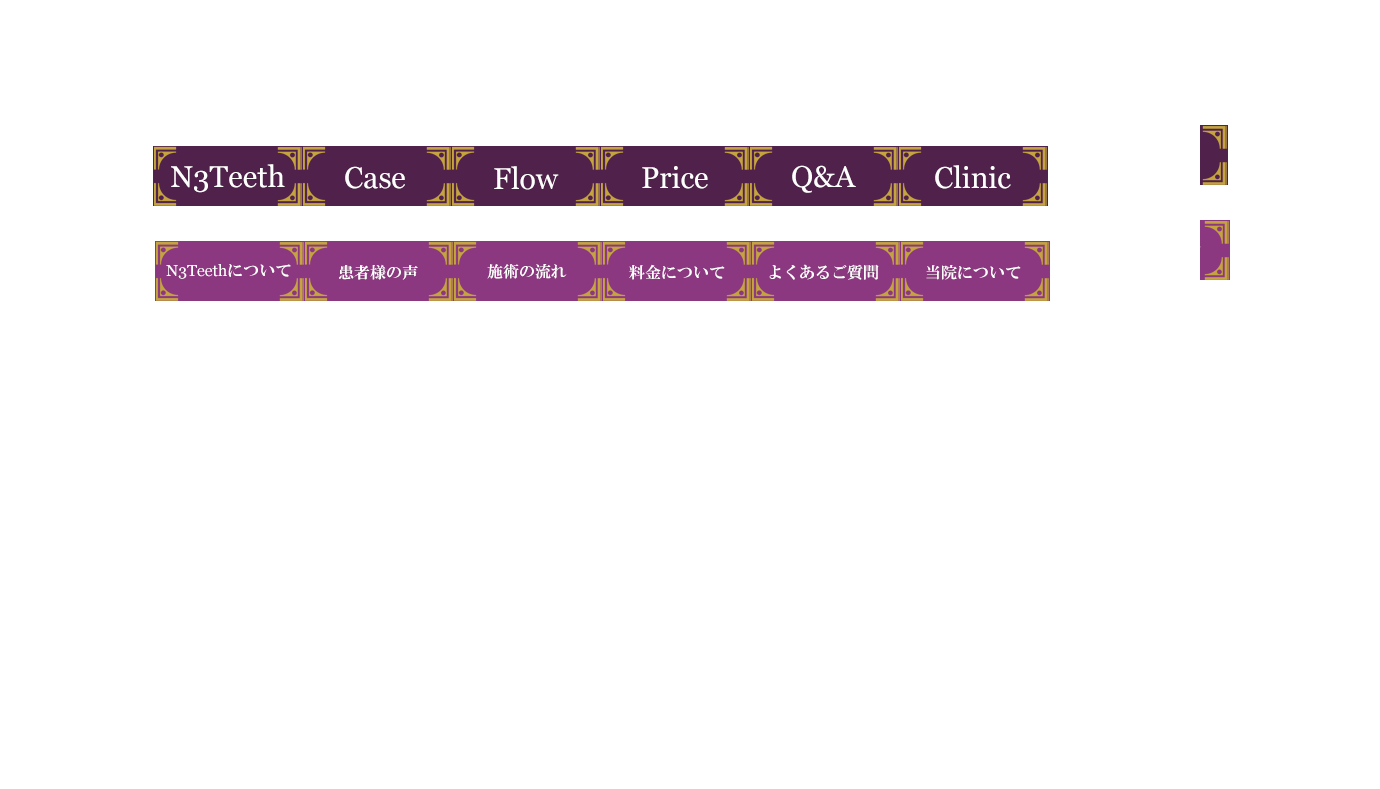
<style>
.page{position:relative;width:1380px;height:789px;background:#ffffff}
.page>*{position:absolute;margin:0}
.t1{font:30px "Georgia";color:#ffffff}
.t2{font:16px "Georgia";color:#ffffff}
.t3{font:16px "HGMinchoE";color:#ffffff}
</style>
<div class="page">
<p class="t1" style="left:171px;top:164px;width:114px;height:29px">N3Teeth</p>
<p class="t1" style="left:345px;top:166px;width:60px;height:23px">Case</p>
<p class="t1" style="left:494px;top:166px;width:65px;height:24px">Flow</p>
<p class="t1" style="left:642px;top:166px;width:66px;height:23px">Price</p>
<p class="t1" style="left:792px;top:165px;width:64px;height:28px">Q&amp;A</p>
<p class="t1" style="left:935px;top:165px;width:76px;height:24px">Clinic</p>
<p class="t2" style="left:166px;top:264px;width:125px;height:15px">N3Teeth<span class="t3">について</span></p>
<p class="t3" style="left:339px;top:264px;width:79px;height:16px">患者様の声</p>
<p class="t3" style="left:487px;top:264px;width:80px;height:15px">施術の流れ</p>
<p class="t3" style="left:629px;top:264px;width:96px;height:16px">料金について</p>
<p class="t3" style="left:769px;top:264px;width:110px;height:16px">よくあるご質問</p>
<p class="t3" style="left:926px;top:265px;width:95px;height:15px">当院について</p>
</div>
